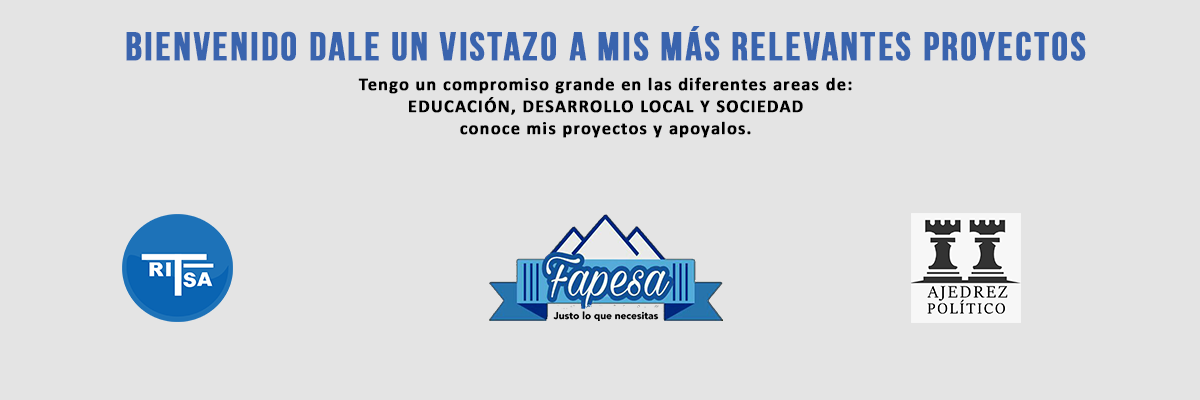
<style>
.page{position:relative;width:1200px;height:400px;background:#e4e4e4}
.page>*{position:absolute;margin:0}
.t1{font:40px "BebasNeueBold";letter-spacing:0.05em;color:#3a64ae;font-weight:bold}
.t2{font:18px "Calibri-Bold";letter-spacing:0.05em;color:#000000;font-weight:bold}
</style>
<div class="page">
<p class="t1" style="left:126px;top:26px;width:960px;height:35px">Bienvenido dale un vistazo a mis más relevantes proyectos</p>
<p class="t2" style="left:358px;top:77px;width:494px;height:61px;text-align:center">Tengo un compromiso grande en las diferentes areas de:<br>EDUCACIÓN, DESARROLLO LOCAL Y SOCIEDAD<br>conoce mis proyectos y apoyalos.</p>
</div>
